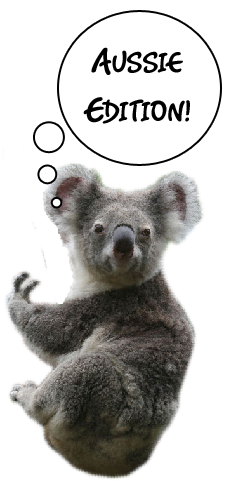
<style>
.page{position:relative;width:230px;height:500px;background:#ffffff}
.page>*{position:absolute;margin:0}
.t1{font:36px "RomyCaps";color:#000000}
</style>
<div class="page">
<p class="t1" style="left:83px;top:47px;width:107px;height:77px;text-align:center">Aussie<br>Edition!</p>
</div>
